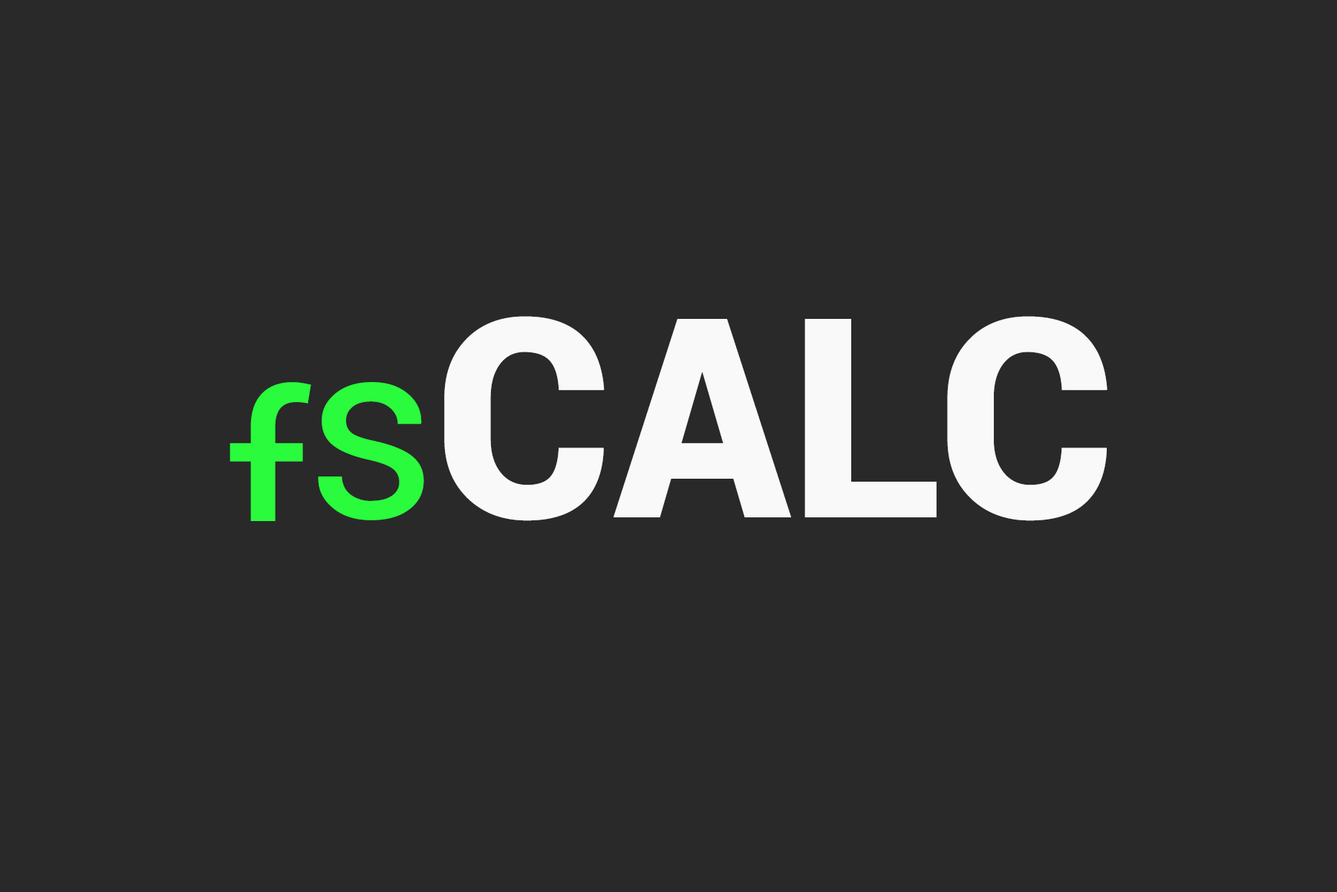
<style>
.page{position:relative;width:1337px;height:892px;background:#292929}
.page>*{position:absolute;margin:0}
.t1{font:309.6px "Yantramanav-Black";color:#f9f9f9}
.t2{font:278.6px "Yantramanav-Regular";color:#2afb3d}
</style>
<div class="page">
<p class="t1" style="left:444px;top:316px;width:664px;height:205px">CALC</p>
<p class="t2" style="left:230px;top:382px;width:81px;height:194px">f</p>
<p class="t2" style="left:318px;top:382px;width:106px;height:138px">s</p>
</div>
